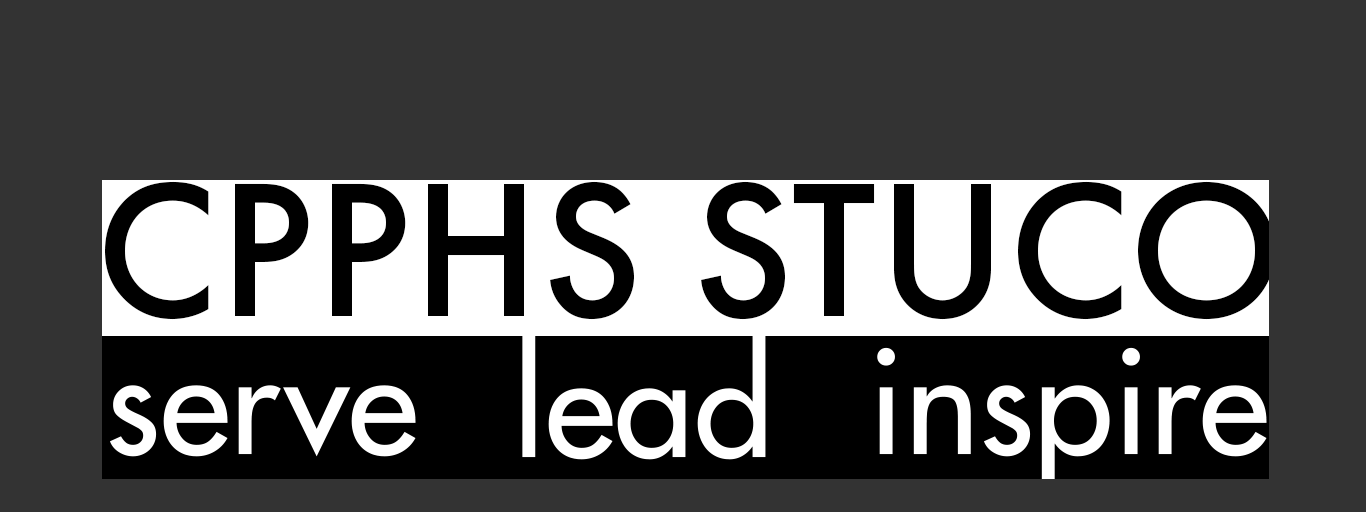
<style>
.page{position:relative;width:1366px;height:512px;background:#333333}
.page>*{position:absolute;margin:0}
.t1{font:198.4px "FuturaPT-Medium";letter-spacing:0.01em;color:#000000;text-transform:uppercase}
.t2{font:142.4px "Futura-Medium";color:#ffffff}
</style>
<div class="page">
<p class="t1" style="left:105px;top:181px;width:1170px;height:139px">CPPHS STUCO</p>
<p class="t2" style="left:522px;top:333px;width:244px;height:127px">lead</p>
<p class="t2" style="left:877px;top:347px;width:390px;height:146px">inspire</p>
<p class="t2" style="left:109px;top:385px;width:307px;height:72px">serve</p>
</div>
